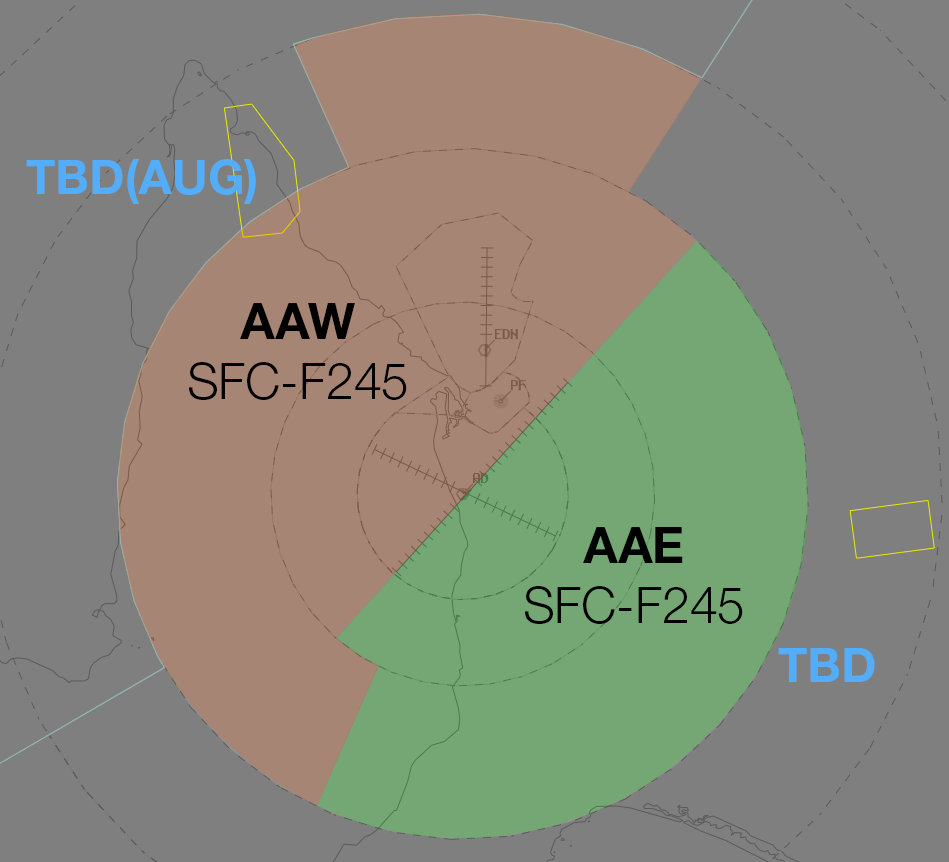
<style>
.page{position:relative;width:949px;height:862px;background:#7f7f7f}
.page>*{position:absolute;margin:0}
.t1{font:48.2px "HelveticaNeueLTStd-Bd";color:#53adf9}
.t2{font:50.1px "HelveticaNeueLTStd-Lt";color:#000000}
.t3{font:50.1px "HelveticaNeueLTStd-Bd";color:#000000}
</style>
<div class="page">
<p class="t1" style="left:26px;top:159px;width:230px;height:45px">TBD(AUG)</p>
<p class="t2" style="left:189px;top:303px;width:218px;height:97px;text-align:center"><span class="t3">AAW<br></span>SFC-F245</p>
<p class="t2" style="left:525px;top:527px;width:218px;height:97px;text-align:center"><span class="t3">AAE<br></span>SFC-F245</p>
<p class="t1" style="left:778px;top:648px;width:97px;height:34px">TBD</p>
</div>
